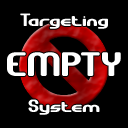
<style>
.page{position:relative;width:128px;height:128px;background:#000000}
.page>*{position:absolute;margin:0}
.t1{font:18px "GravitateBRK";color:#ffffff}
.t2{font:34px "GravitateBRK";color:#ffffff}
</style>
<div class="page">
<p class="t1" style="left:20px;top:13px;width:88px;height:16px">Targeting</p>
<p class="t2" style="left:7px;top:52px;width:114px;height:24px">EMPTY</p>
<p class="t1" style="left:28px;top:99px;width:72px;height:16px">System</p>
</div>
